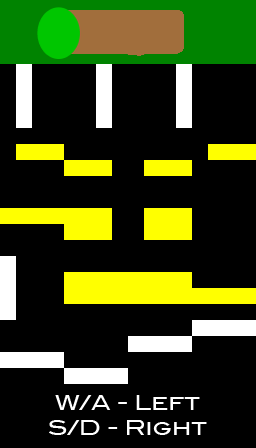
<style>
.page{position:relative;width:256px;height:448px;background:#000000}
.page>*{position:absolute;margin:0}
.t1{font:20.8px "BlairMdITCTTMedium";color:#ffffff}
</style>
<div class="page">
<p class="t1" style="left:49px;top:395px;width:158px;height:40px;text-align:center">W/A - Left<br>S/D - Right</p>
</div>
